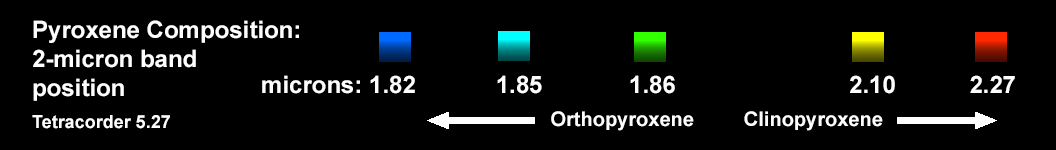
<style>
.page{position:relative;width:1056px;height:150px;background:#000000}
.page>*{position:absolute;margin:0}
.t1{font:24px "Arial-BoldMT";color:#fefefe}
.t2{font:18px "Arial-BoldMT";color:#fefefe}
.t3{font:20px "Arial-BoldMT";color:#fefefe}
</style>
<div class="page">
<p class="t1" style="left:32px;top:20px;width:267px;height:109px">Pyroxene Composition:<br>2-micron band<br>position<br><br><span class="t2">Tetracorder 5.27</span></p>
<p class="t1" style="left:262px;top:75px;width:753px;height:19px">microns: 1.82            1.85             1.86                          2.10           2.27</p>
<p class="t3" style="left:551px;top:111px;width:332px;height:20px">Orthopyroxene         Clinopyroxene</p>
</div>
